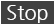
<style>
.page{position:relative;width:55px;height:25px;background:#404040}
.page>*{position:absolute;margin:0}
.t1{font:20px "NanumGothic";color:#ffffff}
</style>
<div class="page">
<p class="t1" style="left:7px;top:5px;width:41px;height:18px">Stop</p>
</div>
